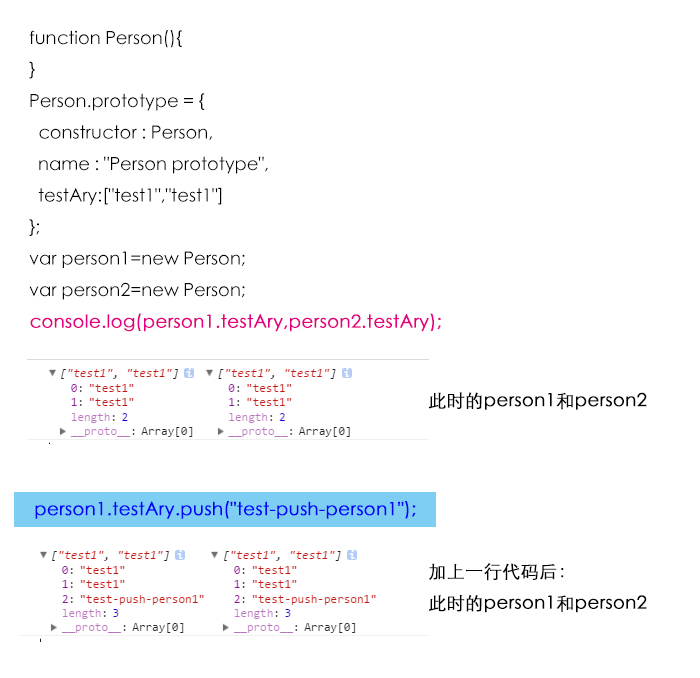
<style>
.page{position:relative;width:700px;height:678px;background:#ffffff}
.page>*{position:absolute;margin:0}
.t1{font:18px "STXihei";color:#000000}
.t2{font:18px "STXihei";color:#e4007f;font-weight:bold}
.t3{font:18px "STXihei";color:#000000;font-weight:bold}
.t4{font:18px "STXihei";color:#0000ff;font-weight:bold}
</style>
<div class="page">
<p class="t1" style="left:29px;top:30px;width:412px;height:302px">function Person(){<br>  }<br>  Person.prototype = {<br>    constructor : Person,<br>    name : "Person prototype",<br>    testAry:["test1","test1"]<br>  };<br>  var person1=new Person;<br>  var person2=new Person;<br>  <span class="t2">console.log(person1.testAry,person2.testAry);</span></p>
<p class="t3" style="left:428px;top:392px;width:219px;height:18px">此时的person1和person2</p>
<p class="t4" style="left:35px;top:501px;width:381px;height:18px">person1.testAry.push("test-push-person1");</p>
<p class="t3" style="left:428px;top:563px;width:219px;height:50px">加上一行代码后：<br>此时的person1和person2</p>
</div>
